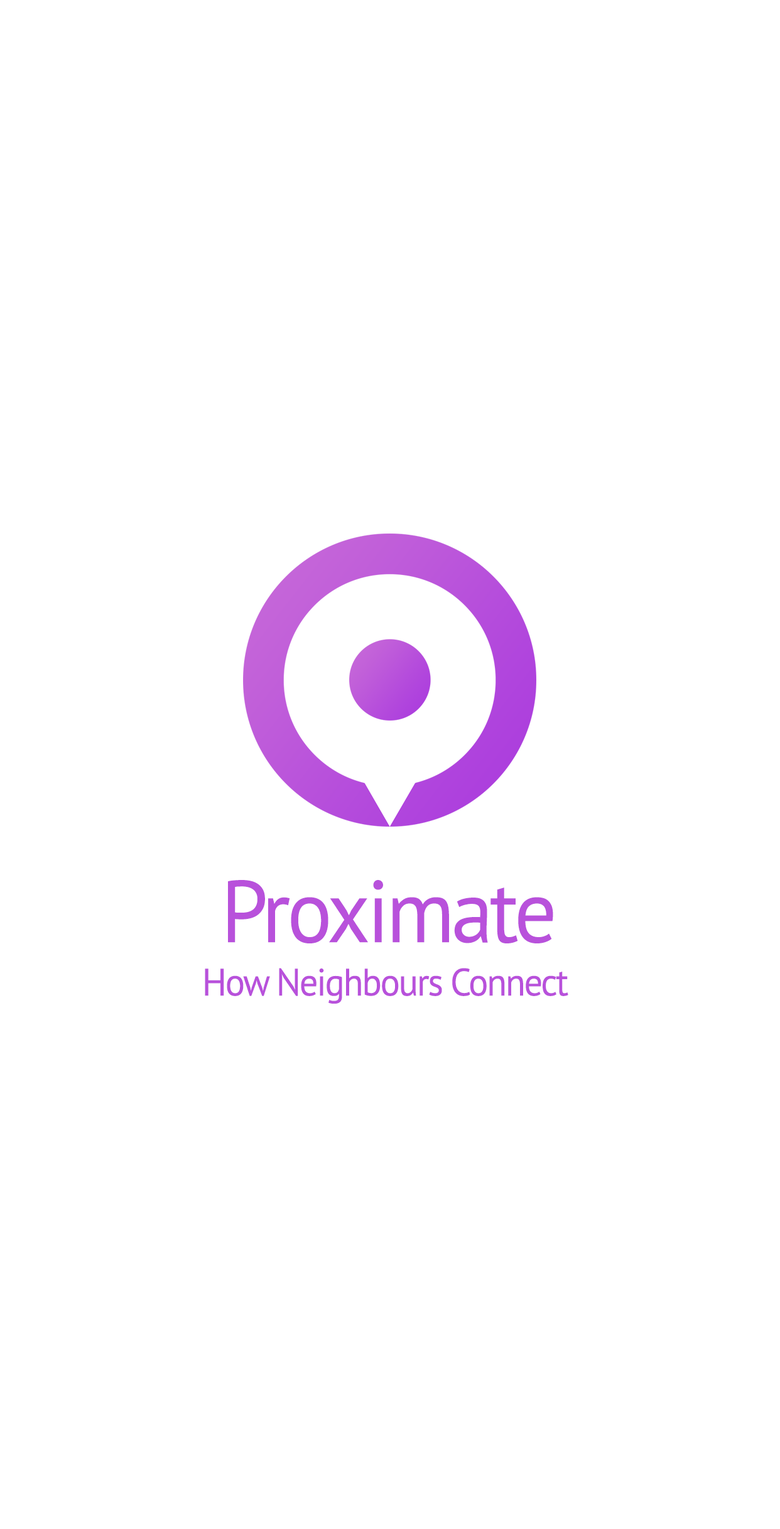
<style>
.page{position:relative;width:780px;height:1529px;background:#ffffff}
.page>*{position:absolute;margin:0}
.t1{font:87.9px "PTSans-Regular";letter-spacing:-0.04em;color:#b851db;scale:0.96 1}
.t2{font:38.3px "PTSans-Regular";letter-spacing:-0.04em;color:#b851db;scale:0.96 1}
</style>
<div class="page">
<p class="t1" style="left:228px;top:880px;width:325px;height:64px">Proximate</p>
<p class="t2" style="left:205px;top:968px;width:363px;height:36px">How Neighbours Connect</p>
</div>
